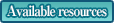
<style>
.page{position:relative;width:114px;height:23px;background:#115777}
.page>*{position:absolute;margin:0}
.t1{font:14px "RyuminPro-ExBold";letter-spacing:-0.08em;color:#ffffff;scale:0.9 1}
</style>
<div class="page">
<p class="t1" style="left:7px;top:5px;width:100px;height:12px">Available resources</p>
</div>
